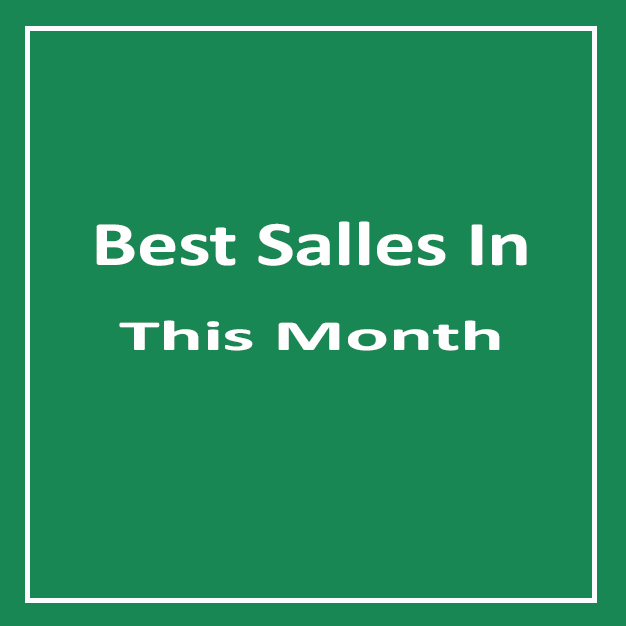
<style>
.page{position:relative;width:626px;height:626px;background:#198754}
.page>*{position:absolute;margin:0}
.t1{font:64px "Calibri-Bold";letter-spacing:-0.005em;color:#fefefe;scale:1.29 1}
.t2{font:43.3px "Calibri-Bold";letter-spacing:-0.005em;color:#fefefe;scale:1.9 1}
</style>
<div class="page">
<p class="t1" style="left:96px;top:221px;width:431px;height:45px">Best Salles In</p>
<p class="t2" style="left:119px;top:320px;width:381px;height:31px">This Month</p>
</div>
